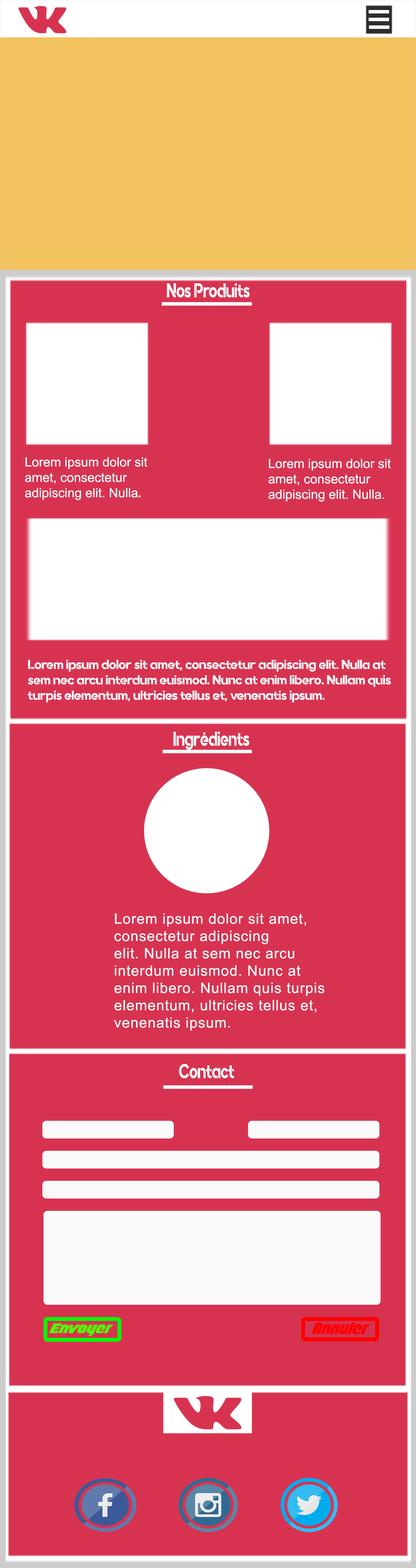
<style>
.page{position:relative;width:416px;height:1568px;background:#d73351}
.page>*{position:absolute;margin:0}
.t1{font:19.8px "Quantify";color:#ffffff;scale:0.75 1}
.t2{font:12.8px "ArialMT";color:#ffffff}
.t3{font:12.8px "Quantify";color:#ffffff}
.t4{font:14.4px "ArialMT";letter-spacing:0.04em;color:#ffffff}
.t5{font:19.9px "Quantify";color:#ffffff;scale:0.75 1}
.t6{font:12.9px "Longhaul";color:#4eff00;scale:1.18 1}
.t7{font:15px "Longhaul";color:#ff0000}
</style>
<div class="page">
<p class="t1" style="left:167px;top:283px;width:82px;height:15px">Nos Produits</p>
<p class="t2" style="left:25px;top:457px;width:122px;height:43px"><span class="t3"><br></span>Lorem ipsum dolor sit <br>amet, consectetur <br>adipiscing elit. Nulla<span class="t3">.</span></p>
<p class="t2" style="left:268px;top:459px;width:123px;height:43px">Lorem ipsum dolor sit <br>amet, consectetur <br>adipiscing elit. Nulla.</p>
<p class="t3" style="left:28px;top:660px;width:363px;height:42px">Lorem ipsum dolor sit amet, consectetur adipiscing elit. Nulla at <br>sem nec arcu interdum euismod. Nunc at enim libero. Nullam quis<br>turpis elementum, ultricies tellus et, venenatis ipsum.</p>
<p class="t1" style="left:173px;top:732px;width:76px;height:18px">Ingrédients</p>
<p class="t4" style="left:114px;top:913px;width:210px;height:118px">Lorem ipsum dolor sit amet, <br>consectetur adipiscing <br>elit. Nulla at sem nec arcu <br>interdum euismod. Nunc at <br>enim libero. Nullam quis turpis <br>elementum, ultricies tellus et, <br>venenatis ipsum.</p>
<p class="t5" style="left:179px;top:1064px;width:55px;height:14px">Contact</p>
<p class="t6" style="left:49px;top:1323px;width:64px;height:13px">Envoyer</p>
<p class="t7" style="left:311px;top:1322px;width:58px;height:12px">Annuler</p>
</div>
